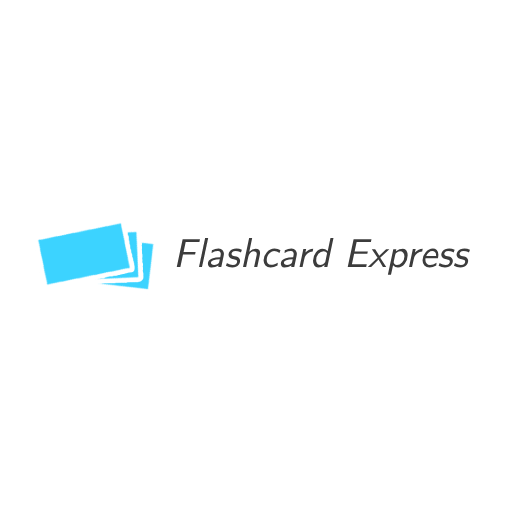
<style>
.page{position:relative;width:512px;height:512px;background:#ffffff}
.page>*{position:absolute;margin:0}
.t1{font:40px "CMUSansSerif-Oblique";color:#3c3c3c}
</style>
<div class="page">
<p class="t1" style="left:176px;top:238px;width:294px;height:37px">Flashcard Express</p>
</div>
